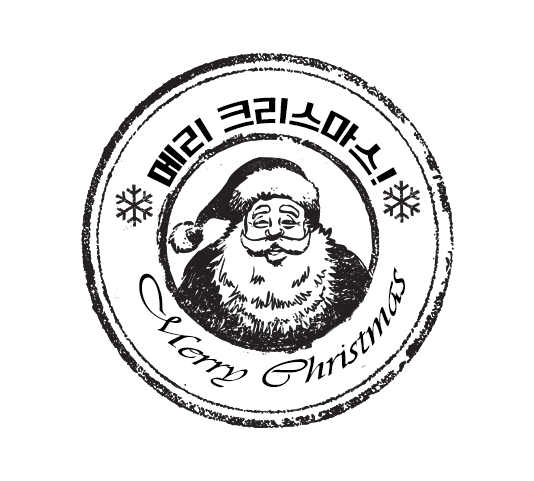
<style>
.page{position:relative;width:534px;height:481px;background:#ffffff}
.page>*{position:absolute;margin:0}
.t1{font:28px/18px "TTManbalchungchunR";color:#000000}
.t2{font:36px/18px "Vivaldii";color:#000000}
</style>
<div class="page">
<p class="t1" style="left:147px;top:97px;width:250px;height:91px">메리 크리스마스!</p>
<p class="t2" style="left:139px;top:267px;width:266px;height:121px">Merry Christmas</p>
</div>
